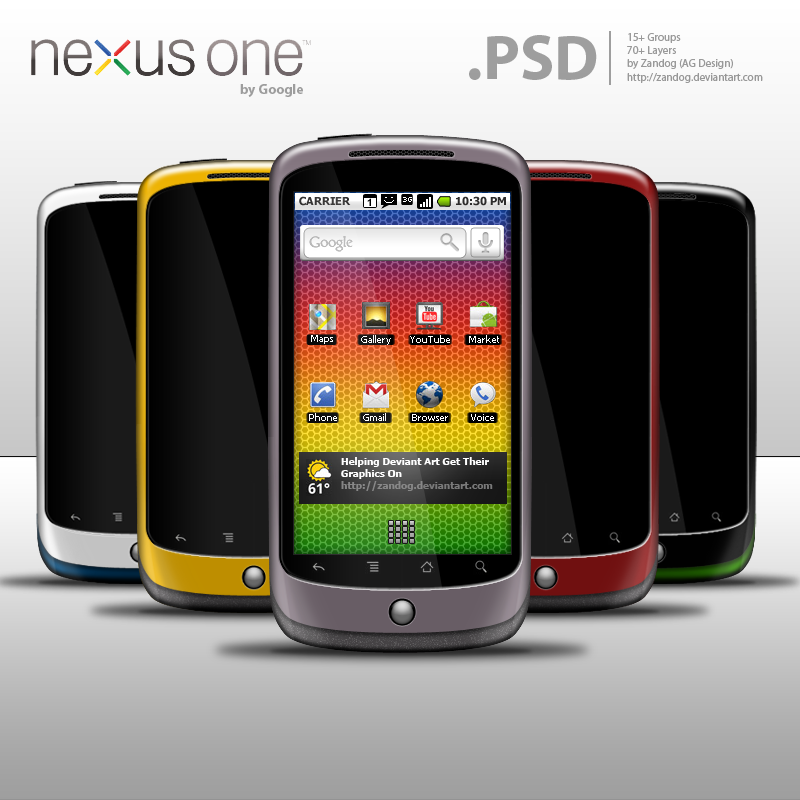
<style>
.page{position:relative;width:800px;height:800px}
.page>*{position:absolute;margin:0}
.t1{font:64px "MyriadPro-Bold";color:#9e9e9e}
.t2{font:11px "MyriadPro-Regular";color:#999999}
.t3{font:14px "MyriadPro-Bold";color:#9d9d9d}
.t4{font:11px "Tahoma-Bold";color:#2d2c2c}
.t5{font:10px "Tahoma";color:#ffffff}
.t6{font:10px "Tahoma-Bold";color:#ffffff}
.t7{font:10px "Tahoma-Bold";color:#7a7a7a}
</style>
<div class="page">
<p class="t1" style="left:469px;top:35px;width:128px;height:45px">.PSD</p>
<p class="t2" style="left:627px;top:33px;width:136px;height:50px">15+ Groups<br>70+ Layers<br>by Zandog (AG Design)<br>http://zandog.deviantart.com</p>
<p class="t3" style="left:240px;top:84px;width:63px;height:13px">by Google</p>
<p class="t4" style="left:299px;top:196px;width:52px;height:10px">CARRIER</p>
<p class="t4" style="left:456px;top:196px;width:50px;height:10px">10:30 PM</p>
<p class="t5" style="left:311px;top:335px;width:22px;height:9px">Maps</p>
<p class="t5" style="left:361px;top:335px;width:30px;height:10px">Gallery</p>
<p class="t5" style="left:410px;top:335px;width:40px;height:8px">YouTube</p>
<p class="t5" style="left:469px;top:335px;width:30px;height:8px">Market</p>
<p class="t5" style="left:309px;top:413px;width:28px;height:8px">Phone</p>
<p class="t5" style="left:363px;top:413px;width:23px;height:8px">Gmail</p>
<p class="t5" style="left:412px;top:414px;width:36px;height:7px">Browser</p>
<p class="t5" style="left:471px;top:414px;width:23px;height:7px">Voice</p>
<p class="t6" style="left:341px;top:457px;width:152px;height:34px">Helping Deviant Art Get Their<br>Graphics On<br><span class="t7">http://zandog.deviantart.com</span></p>
</div>
